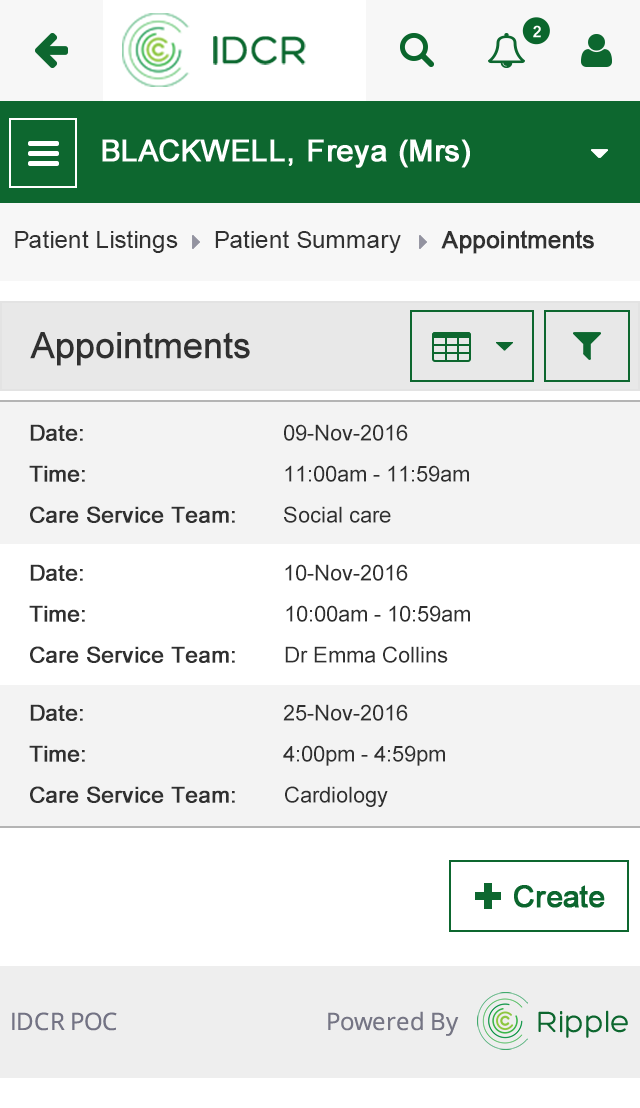
<style>
.page{position:relative;width:640px;height:1108px;background:#ffffff}
.page>*{position:absolute;margin:0}
.t1{font:24px "ArialMT";color:#313131}
.t2{font:24px "ArialMT";color:#313131;font-weight:bold}
.t3{font:36px "ArialMT";color:#303030;font-weight:bold}
.t4{font:22px "ArialMT";color:#303030;font-weight:bold}
.t5{font:22px "ArialMT";color:#303030}
</style>
<div class="page">
<p class="t1" style="left:15px;top:230px;width:163px;height:23px">Patient Listings</p>
<p class="t1" style="left:215px;top:230px;width:186px;height:23px">Patient Summary</p>
<p class="t2" style="left:441px;top:230px;width:153px;height:24px">Appointments</p>
<p class="t3" style="left:30px;top:332px;width:220px;height:34px">Appointments</p>
<p class="t4" style="left:30px;top:424px;width:53px;height:17px">Date:</p>
<p class="t5" style="left:284px;top:424px;width:124px;height:17px">09-Nov-2016</p>
<p class="t4" style="left:29px;top:465px;width:56px;height:17px">Time:</p>
<p class="t5" style="left:285px;top:465px;width:184px;height:17px">11:00am - 11:59am</p>
<p class="t4" style="left:30px;top:506px;width:205px;height:17px">Care Service Team:</p>
<p class="t5" style="left:284px;top:506px;width:107px;height:17px">Social care</p>
<p class="t4" style="left:30px;top:564px;width:53px;height:17px">Date:</p>
<p class="t5" style="left:285px;top:564px;width:123px;height:17px">10-Nov-2016</p>
<p class="t4" style="left:29px;top:605px;width:56px;height:17px">Time:</p>
<p class="t5" style="left:286px;top:605px;width:184px;height:17px">10:00am - 10:59am</p>
<p class="t4" style="left:30px;top:646px;width:205px;height:17px">Care Service Team:</p>
<p class="t5" style="left:285px;top:646px;width:163px;height:17px">Dr Emma Collins</p>
<p class="t4" style="left:30px;top:704px;width:53px;height:17px">Date:</p>
<p class="t5" style="left:283px;top:704px;width:125px;height:17px">25-Nov-2016</p>
<p class="t4" style="left:29px;top:745px;width:56px;height:17px">Time:</p>
<p class="t5" style="left:283px;top:745px;width:162px;height:21px">4:00pm - 4:59pm</p>
<p class="t4" style="left:30px;top:786px;width:205px;height:17px">Care Service Team:</p>
<p class="t5" style="left:285px;top:786px;width:103px;height:21px">Cardiology</p>
</div>
